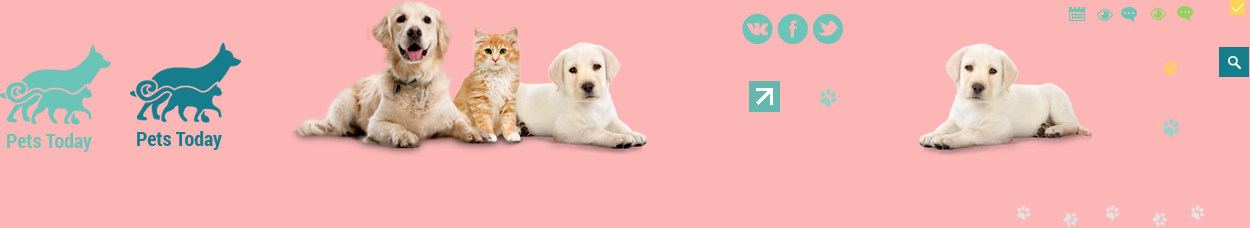
<style>
.page{position:relative;width:1250px;height:228px;background:#fcb6b6}
.page>*{position:absolute;margin:0}
.t1{font:20px "RobotoCondensed-Bold";color:#6ac4b8}
.t2{font:20px "RobotoCondensed-Bold";color:#157d8c}
</style>
<div class="page">
<p class="t1" style="left:7px;top:133px;width:85px;height:19px">Pets Today</p>
<p class="t2" style="left:137px;top:131px;width:85px;height:19px">Pets Today</p>
</div>
